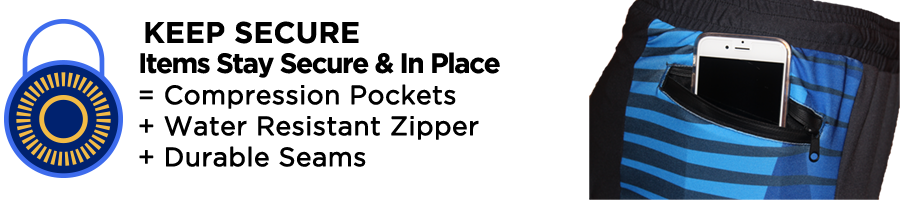
<style>
.page{position:relative;width:900px;height:200px;background:#ffffff}
.page>*{position:absolute;margin:0}
.t1{font:30px "GothamBold";color:#000000}
.t2{font:26px/31px "GothamBook";color:#000000;font-weight:bold}
.t3{font:28px/31px "GothamBold";letter-spacing:-0.055em;color:#000000}
</style>
<div class="page">
<p class="t1" style="left:145px;top:21px;width:214px;height:23px">KEEP SECURE</p>
<p class="t2" style="left:139px;top:52px;width:361px;height:115px"><span class="t3">Items Stay Secure &amp; In Place<br></span>= Compression Pockets <br>+ Water Resistant Zipper <br>+ Durable Seams</p>
</div>
